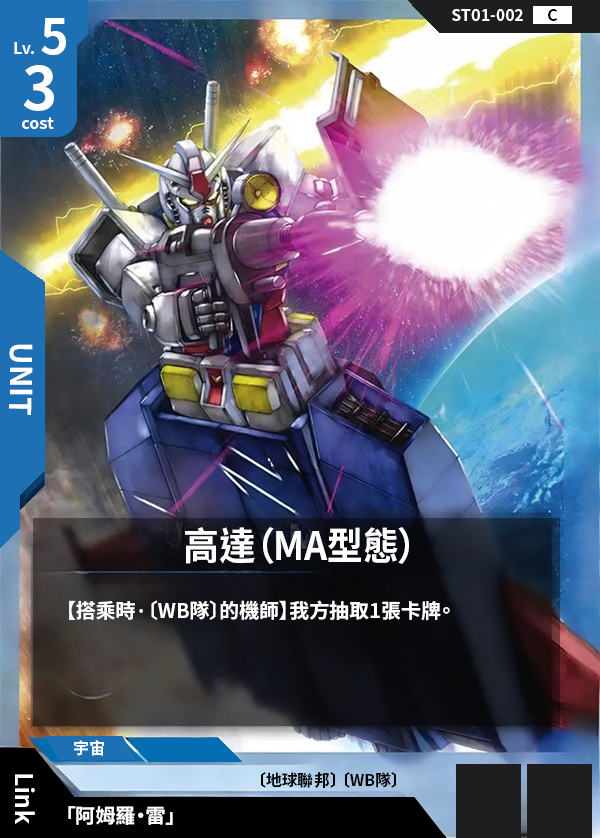
<style>
.page{position:relative;width:600px;height:838px}
.page>*{position:absolute;margin:0}
.t1{font:16px "NotoSansCJKtc-Bold";color:#ffffff}
.t2{font:16px "NotoSansCJKtc-Bold";color:#000000}
.t3{font:48px "NotoSansCJKtc-Bold";color:#ffffff}
.t4{font:60px "NotoSansCJKtc-Bold";color:#ffffff}
.t5{font:30px "NotoSansCJKtc-Bold";color:#ffffff}
.t6{font:38.4px "NotoSansCJKtc-Bold";color:#ffffff;scale:0.94 1}
.t7{font:20px "NotoSansCJKtc-Bold";color:#ffffff}
.t8{font:24px "NotoSansCJKtc-Bold";color:#ffffff}
</style>
<div class="page">
<p class="t1" style="left:452px;top:9px;width:71px;height:12px">ST01-002</p>
<p class="t2" style="left:548px;top:9px;width:10px;height:12px">C</p>
<p class="t3" style="left:41px;top:18px;width:25px;height:37px">5</p>
<p class="t1" style="left:14px;top:42px;width:20px;height:12px">Lv.</p>
<p class="t4" style="left:23px;top:65px;width:31px;height:46px">3</p>
<p class="t1" style="left:22px;top:117px;width:32px;height:12px">cost</p>
<p class="t5" style="left:9px;top:344px;width:24px;height:71px;rotate:90deg">UNIT</p>
<p class="t6" style="left:185px;top:527px;width:224px;height:37px">高達（MA型態）</p>
<p class="t7" style="left:69px;top:600px;width:381px;height:21px">【搭乘時·〔WB隊〕的機師】我方抽取1張卡牌。</p>
<p class="t1" style="left:74px;top:740px;width:30px;height:16px">宇宙</p>
<p class="t8" style="left:15px;top:774px;width:20px;height:50px;rotate:90deg">Link</p>
<p class="t2" style="left:261px;top:772px;width:135px;height:16px">〔地球聯邦〕 〔WB隊〕</p>
<p class="t7" style="left:68px;top:806px;width:105px;height:19px">「阿姆羅・雷」</p>
</div>
